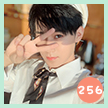
<style>
.page{position:relative;width:108px;height:108px}
.page>*{position:absolute;margin:0}
.t1{font:12px "DFPiPi-W5-WINP-BF";letter-spacing:0.1em;color:#ffffff;font-weight:bold}
</style>
<div class="page">
<p class="t1" style="left:78px;top:85px;width:25px;height:10px">256</p>
</div>
